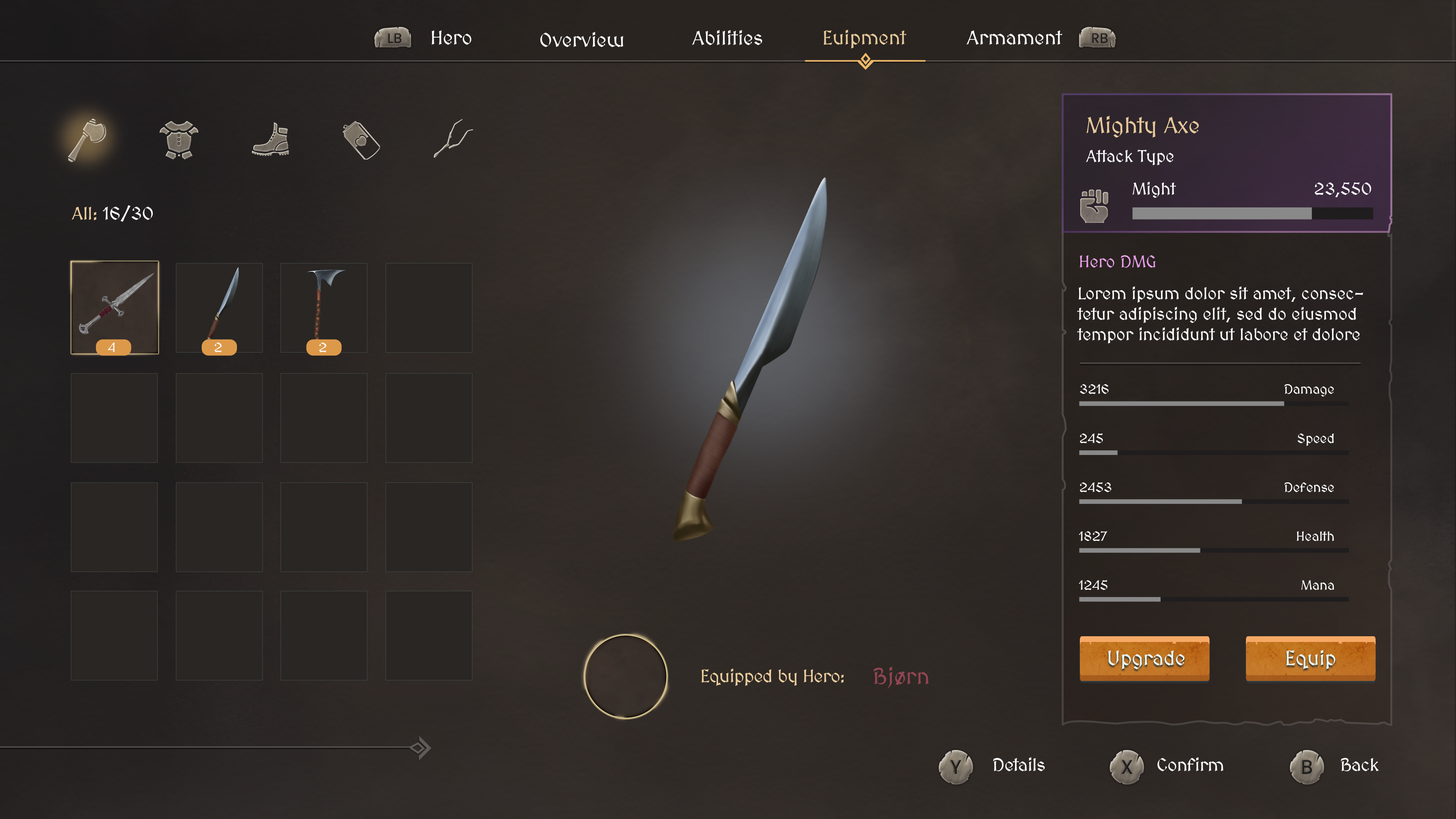
<style>
.page{position:relative;width:1456px;height:819px}
.page>*{position:absolute;margin:0}
.t1{font:19.8px "MedievalSharp";color:#ffffff}
.t2{font:19.8px "MedievalSharp";color:#e5c89a}
.t3{font:22.7px "MedievalSharp";color:#e5c89a}
.t4{font:17.1px "MedievalSharp";color:#ffffff}
.t5{font:18.2px "MedievalSharp";color:#ffffff}
.t6{font:18.2px "MedievalSharp";color:#ecce9f}
.t7{font:17.1px "MedievalSharp";color:#e89fe9}
.t8{font:13.6px "MedievalSharp";color:#ffffff}
.t9{font:20.5px "MedievalSharp";color:#e5fbfd}
.t10{font:18.2px "MedievalSharp";letter-spacing:-0.02em;color:#ecce9f}
.t11{font:22.7px "MedievalSharp";color:#924552}
.t12{font:18.2px "MedievalSharp";letter-spacing:-0.02em;color:#ffffff}
</style>
<div class="page">
<p class="t1" style="left:692px;top:30px;width:70px;height:15px">Abilities</p>
<p class="t2" style="left:824px;top:30px;width:83px;height:19px">Euipment</p>
<p class="t1" style="left:431px;top:30px;width:40px;height:15px">Hero</p>
<p class="t1" style="left:540px;top:32px;width:83px;height:15px">Overview</p>
<p class="t1" style="left:966px;top:30px;width:96px;height:15px">Armament</p>
<p class="t3" style="left:1086px;top:116px;width:113px;height:22px">Mighty Axe</p>
<p class="t4" style="left:1086px;top:150px;width:88px;height:15px">Attack Type</p>
<p class="t4" style="left:1133px;top:182px;width:43px;height:16px">Might</p>
<p class="t4" style="left:1315px;top:182px;width:56px;height:16px">23,550</p>
<p class="t5" style="left:72px;top:205px;width:81px;height:17px"><span class="t6">All:</span> 16/30</p>
<p class="t7" style="left:1080px;top:255px;width:76px;height:13px">Hero DMG</p>
<p class="t4" style="left:1077px;top:286px;width:286px;height:58px">Lorem ipsum dolor sit amet, consectetur adipiscing elit, sed do eiusmod tempor incididunt ut labore et dolore</p>
<p class="t8" style="left:108px;top:342px;width:7px;height:10px">4</p>
<p class="t8" style="left:215px;top:342px;width:7px;height:10px">2</p>
<p class="t8" style="left:319px;top:342px;width:7px;height:10px">2</p>
<p class="t8" style="left:1080px;top:384px;width:29px;height:10px">3216</p>
<p class="t8" style="left:1284px;top:384px;width:50px;height:13px">Damage</p>
<p class="t8" style="left:1080px;top:433px;width:23px;height:10px">245</p>
<p class="t8" style="left:1297px;top:433px;width:37px;height:13px">Speed</p>
<p class="t8" style="left:1080px;top:482px;width:31px;height:10px">2453</p>
<p class="t8" style="left:1284px;top:482px;width:50px;height:10px">Defense</p>
<p class="t8" style="left:1079px;top:531px;width:29px;height:10px">1827</p>
<p class="t8" style="left:1297px;top:531px;width:37px;height:10px">Health</p>
<p class="t8" style="left:1079px;top:580px;width:29px;height:10px">1245</p>
<p class="t8" style="left:1301px;top:580px;width:33px;height:10px">Mana</p>
<p class="t9" style="left:1108px;top:650px;width:77px;height:19px">Upgrade</p>
<p class="t9" style="left:1286px;top:650px;width:49px;height:19px">Equip</p>
<p class="t10" style="left:701px;top:668px;width:143px;height:18px">Equipped by Hero:</p>
<p class="t11" style="left:873px;top:667px;width:56px;height:22px">Bjørn</p>
<p class="t12" style="left:993px;top:757px;width:52px;height:14px">Details</p>
<p class="t12" style="left:1157px;top:757px;width:67px;height:14px">Confirm</p>
<p class="t12" style="left:1341px;top:758px;width:38px;height:13px">Back</p>
</div>
